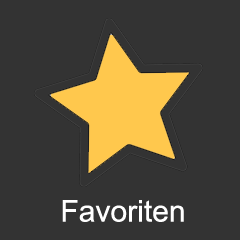
<style>
.page{position:relative;width:240px;height:240px;background:#333333}
.page>*{position:absolute;margin:0}
.t1{font:30px "ArialMT";color:#ffffff}
</style>
<div class="page">
<p class="t1" style="left:62px;top:200px;width:122px;height:22px">Favoriten</p>
</div>
